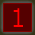
<style>
.page{position:relative;width:35px;height:35px;background:#550000}
.page>*{position:absolute;margin:0}
.t1{font:30px "Courier";letter-spacing:0.018em;color:#ff0000}
</style>
<div class="page">
<p class="t1" style="left:13px;top:8px;width:10px;height:19px">1</p>
</div>
